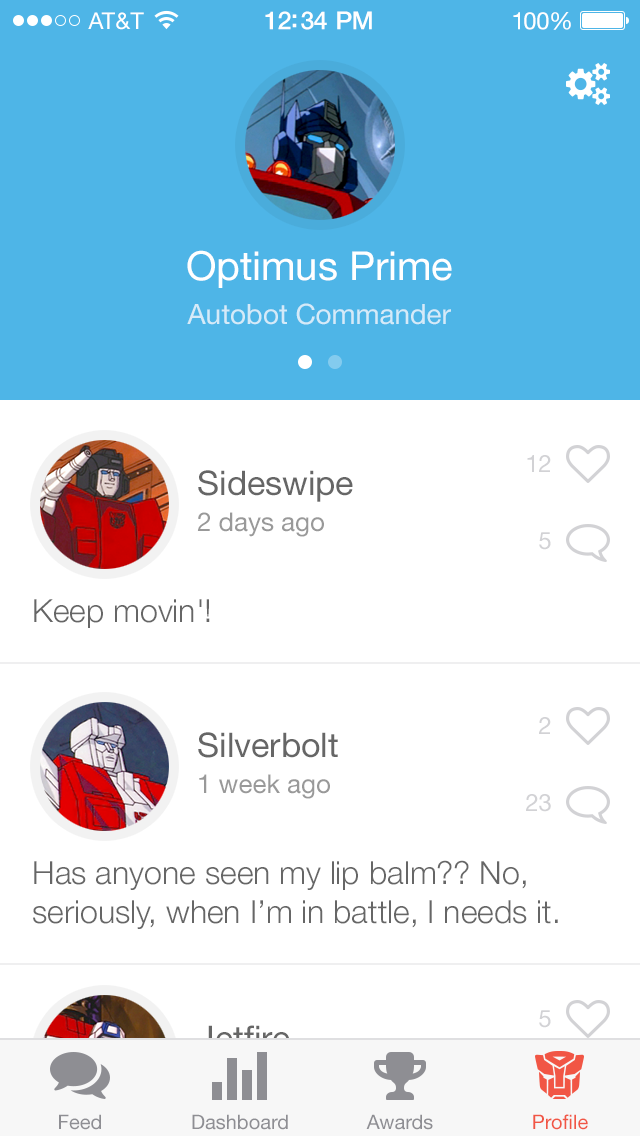
<style>
.page{position:relative;width:640px;height:1136px;background:#ffffff}
.page>*{position:absolute;margin:0}
.t1{font:23px "HelveticaNeue";letter-spacing:0.02em;color:#ffffff}
.t2{font:25px "HelveticaNeue-Medium";letter-spacing:-0.02em;color:#ffffff}
.t3{font:24px "HelveticaNeue";letter-spacing:-0.02em;color:#ffffff}
.t4{font:40px "HelveticaNeue";color:#ffffff}
.t5{font:28px "HelveticaNeue";color:#d5eaf8}
.t6{font:24px/77px "HelveticaNeue";color:#d2d2d5}
.t7{font:26px/36px "HelveticaNeue";color:#999999}
.t8{font:34px/36px "HelveticaNeue";color:#666666}
.t9{font:32px "HelveticaNeue-Light";color:#666666}
.t10{font:24px/77px "HelveticaNeue"}
.t11{font:20px "HelveticaNeue";color:#8e8e93}
.t12{font:20px "HelveticaNeue";color:#f15645}
</style>
<div class="page">
<p class="t1" style="left:88px;top:12px;width:56px;height:18px">AT&amp;T</p>
<p class="t2" style="left:265px;top:11px;width:107px;height:19px">12:34 PM</p>
<p class="t3" style="left:513px;top:12px;width:58px;height:18px">100%</p>
<p class="t4" style="left:187px;top:250px;width:265px;height:38px">Optimus Prime</p>
<p class="t5" style="left:187px;top:303px;width:264px;height:22px">Autobot Commander</p>
<p class="t6" style="left:527px;top:455px;width:24px;height:95px;text-align:right">12<br>5</p>
<p class="t7" style="left:197px;top:470px;width:156px;height:67px"><span class="t8">Sideswipe<br></span>2 days ago</p>
<p class="t9" style="left:34px;top:599px;width:176px;height:29px">Keep movin'!</p>
<p class="t6" style="left:526px;top:717px;width:25px;height:95px;text-align:right">2<br>23</p>
<p class="t8" style="left:198px;top:732px;width:140px;height:67px">Silverbolt<br><span class="t7">1 week ago</span></p>
<p class="t9" style="left:33px;top:860px;width:525px;height:69px">Has anyone seen my lip balm?? No, seriously, when I’m in battle, I needs it.</p>
<p class="t10" style="left:527px;top:1010px;width:24px;height:94px;text-align:right">5<br>12</p>
<p class="t11" style="left:59px;top:1114px;width:42px;height:16px">Feed</p>
<p class="t11" style="left:192px;top:1114px;width:96px;height:16px">Dashboard</p>
<p class="t11" style="left:366px;top:1114px;width:67px;height:16px">Awards</p>
<p class="t12" style="left:533px;top:1114px;width:55px;height:16px">Profile</p>
</div>
